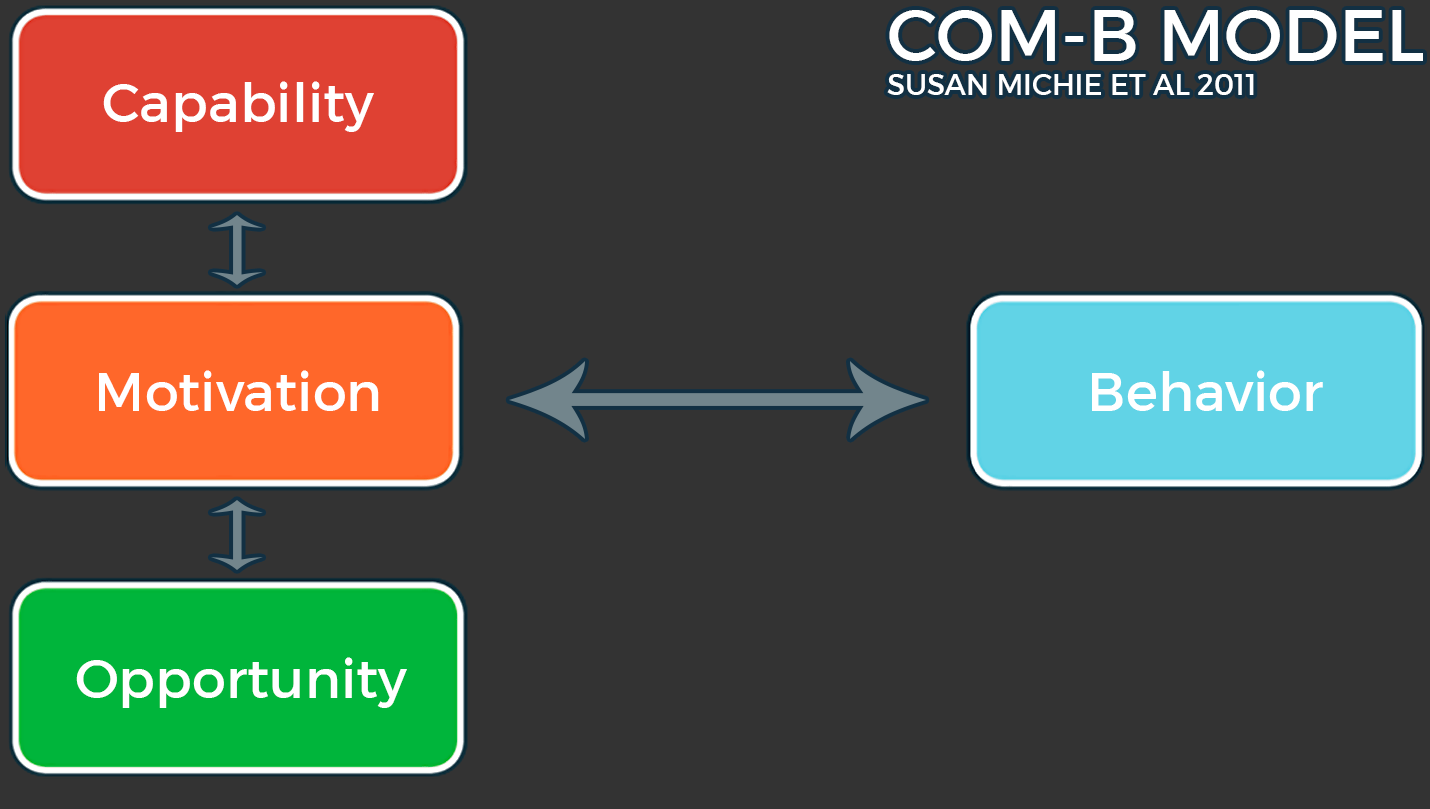
<style>
.page{position:relative;width:1430px;height:809px;background:#333333}
.page>*{position:absolute;margin:0}
.t1{font:28.9px "Montserrat-Regular";color:#ffffff}
.t2{font:72.2px "Montserrat-Regular";color:#ffffff}
.t3{font:54.2px "Montserrat-Regular";color:#ffffff}
</style>
<div class="page">
<p class="t1" style="left:887px;top:10px;width:536px;height:85px"><span class="t2">COM-B MODEL<br></span>SUSAN MICHIE ET AL 2011</p>
<p class="t3" style="left:103px;top:81px;width:271px;height:51px">Capability</p>
<p class="t3" style="left:99px;top:370px;width:280px;height:41px">Motivation</p>
<p class="t3" style="left:1092px;top:370px;width:231px;height:41px">Behavior</p>
<p class="t3" style="left:76px;top:657px;width:331px;height:51px">Opportunity</p>
</div>
